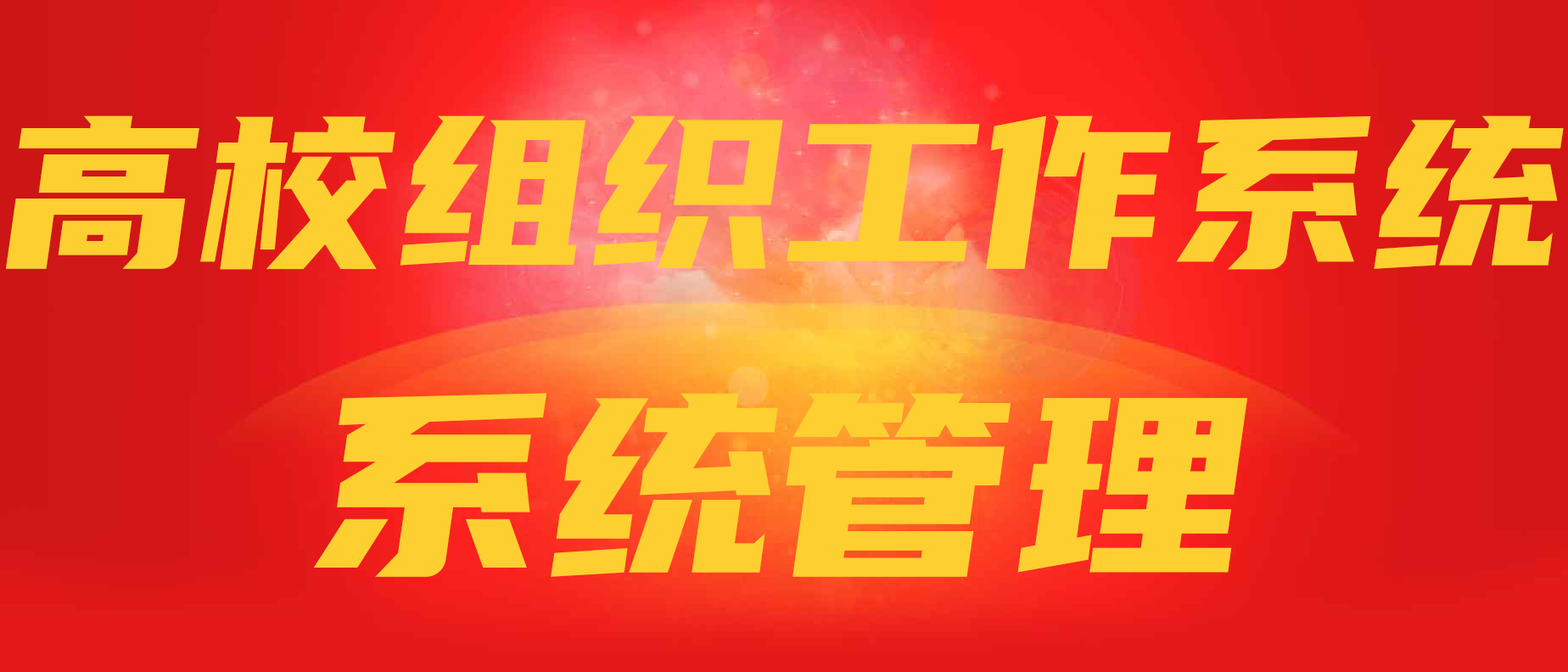
<style>
.page{position:relative;width:1568px;height:672px}
.page>*{position:absolute;margin:0}
.t1{font:212.1px "YouSheBiaoTiHei";color:#fdcf30}
.t2{font:254.5px "YouSheBiaoTiHei";color:#fdcf30}
</style>
<div class="page">
<p class="t1" style="left:6px;top:115px;width:1558px;height:155px">高校组织工作系统</p>
<p class="t2" style="left:313px;top:393px;width:934px;height:184px">系统管理</p>
</div>
